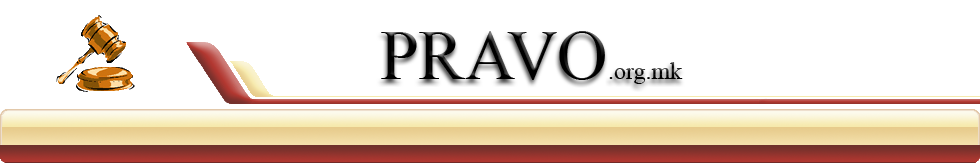
<style>
.page{position:relative;width:980px;height:163px;background:#ffffff}
.page>*{position:absolute;margin:0}
.t1{font:24px "TimesNewRomanPSMT";color:#000000}
.t2{font:70px "TimesNewRomanPSMT";color:#000000}
</style>
<div class="page">
<p class="t1" style="left:381px;top:31px;width:302px;height:53px"><span class="t2">PRAVO</span>.org.mk</p>
</div>
